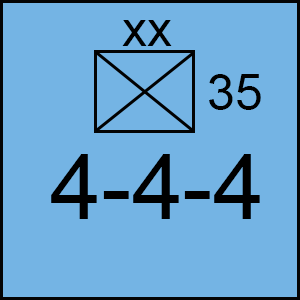
<style>
.page{position:relative;width:300px;height:300px;background:#74b4e4}
.page>*{position:absolute;margin:0}
.t1{font:50px "ArialMT";color:#000000}
.t2{font:91.7px "ArialMT";color:#000000}
</style>
<div class="page">
<p class="t1" style="left:122px;top:20px;width:50px;height:26px">xx</p>
<p class="t1" style="left:209px;top:74px;width:52px;height:36px">35</p>
<p class="t2" style="left:51px;top:154px;width:209px;height:65px">4-4-4</p>
</div>
